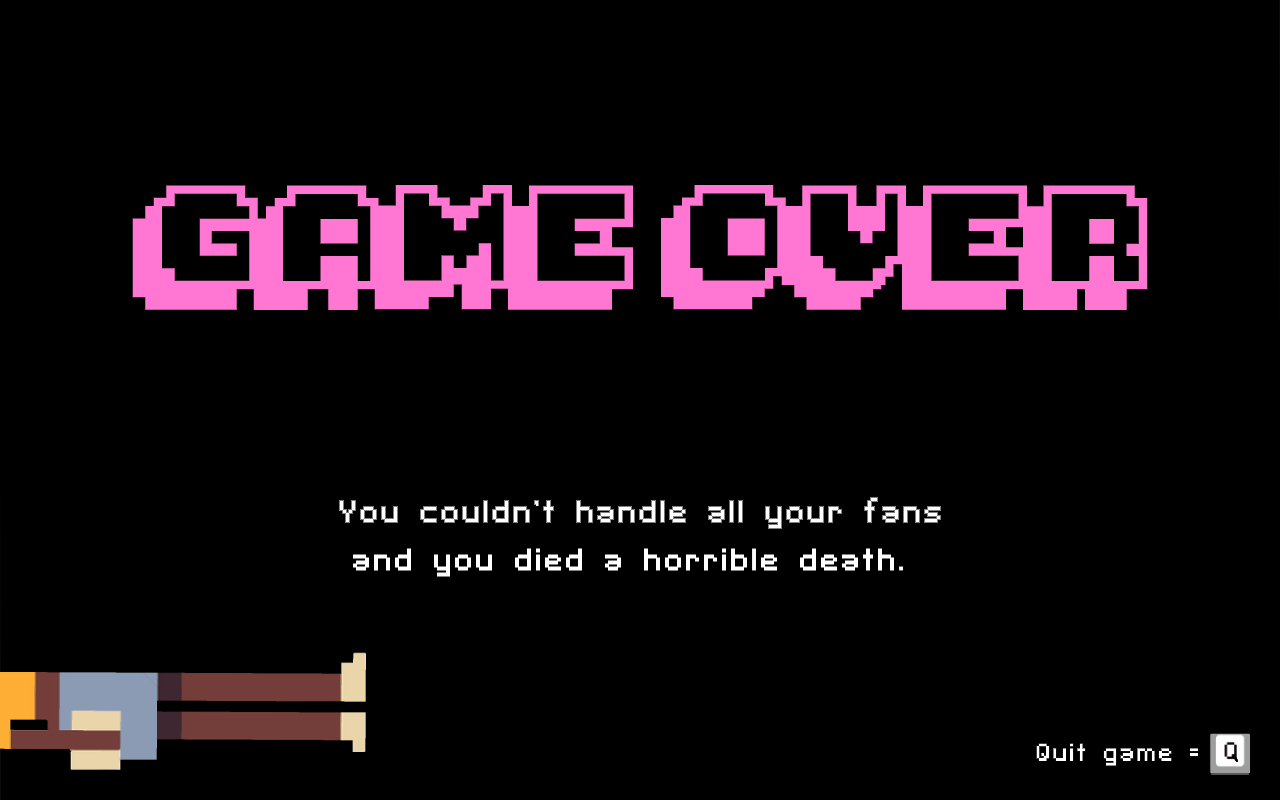
<style>
.page{position:relative;width:1280px;height:800px;background:#000000}
.page>*{position:absolute;margin:0}
.t1{font:80px "Pixelmania";color:#ff77d2}
.t2{font:30px "SFPixelate-Bold";color:#ffffff}
</style>
<div class="page">
<p class="t1" style="left:132px;top:185px;width:1016px;height:125px">GAME OVER</p>
<p class="t2" style="left:339px;top:497px;width:602px;height:80px;text-align:center">You couldn't handle all your fans<br>and you died a horrible death.</p>
</div>
